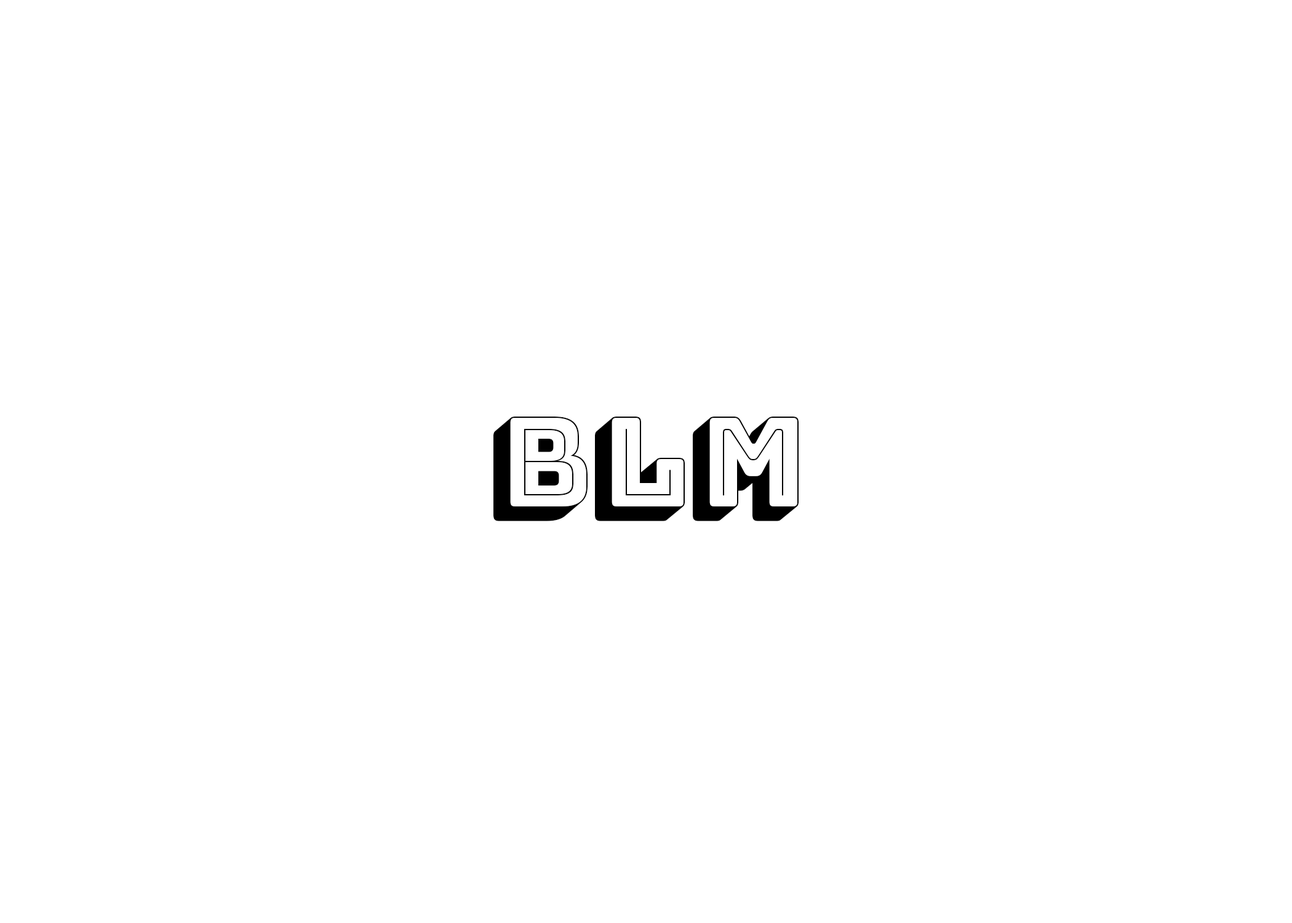
<style>
.page{position:relative;width:1292px;height:923px;background:#ffffff}
.page>*{position:absolute;margin:0}
.t1{font:123.1px "Bungee-Shade";color:#000000}
</style>
<div class="page">
<p class="t1" style="left:493px;top:417px;width:306px;height:104px">BLM</p>
</div>
